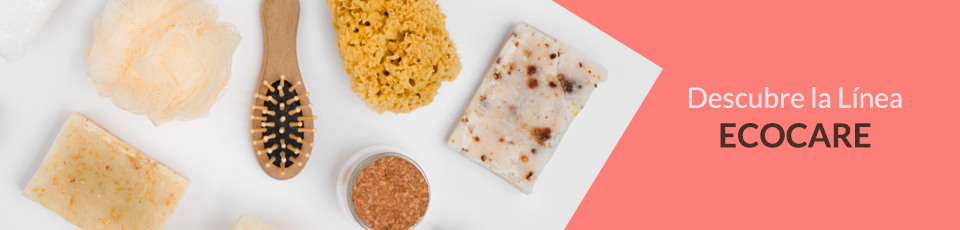
<style>
.page{position:relative;width:960px;height:230px;background:#fb7f78}
.page>*{position:absolute;margin:0}
.t1{font:28px "Lato-Regular";color:#e5e5e5}
.t2{font:33px "Lato-Bold";color:#492e25}
</style>
<div class="page">
<p class="t1" style="left:689px;top:87px;width:213px;height:61px;text-align:center">Descubre la Línea<br><span class="t2">ECOCARE</span></p>
</div>
